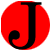
<style>
.page{position:relative;width:50px;height:50px;background:#ff0000}
.page>*{position:absolute;margin:0}
.t1{font:64px "Century";color:#000000}
</style>
<div class="page">
<p class="t1" style="left:8px;top:2px;width:34px;height:48px">J</p>
</div>
